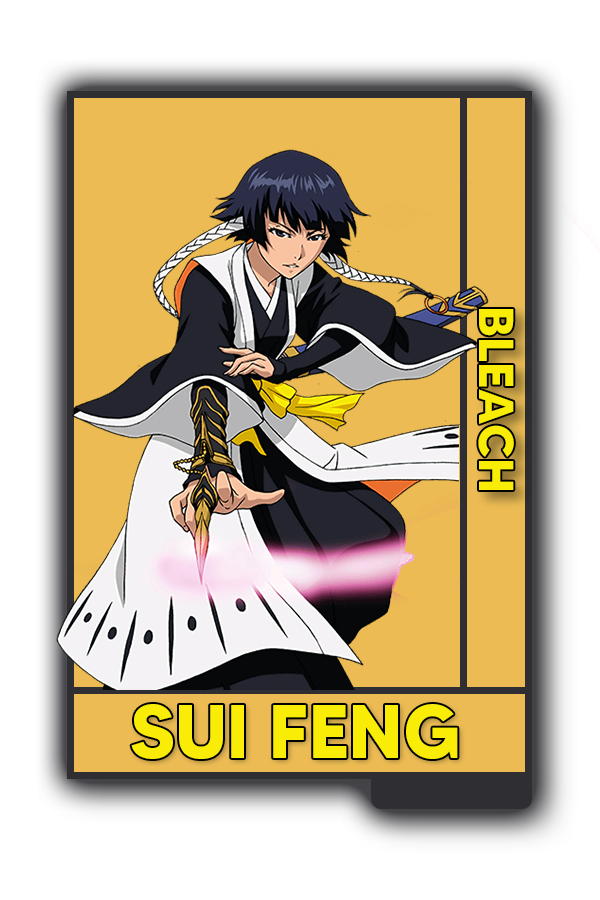
<style>
.page{position:relative;width:600px;height:900px;background:#ecbb53}
.page>*{position:absolute;margin:0}
.t1{font:48.8px "MADETOMMY-Bold";color:#ede413}
.t2{font:75px "MADETOMMY-Bold";color:#ede413}
</style>
<div class="page">
<p class="t1" style="left:478px;top:309px;width:36px;height:181px;rotate:90deg">BLEACH</p>
<p class="t2" style="left:131px;top:704px;width:327px;height:55px">SUI FENG</p>
</div>
